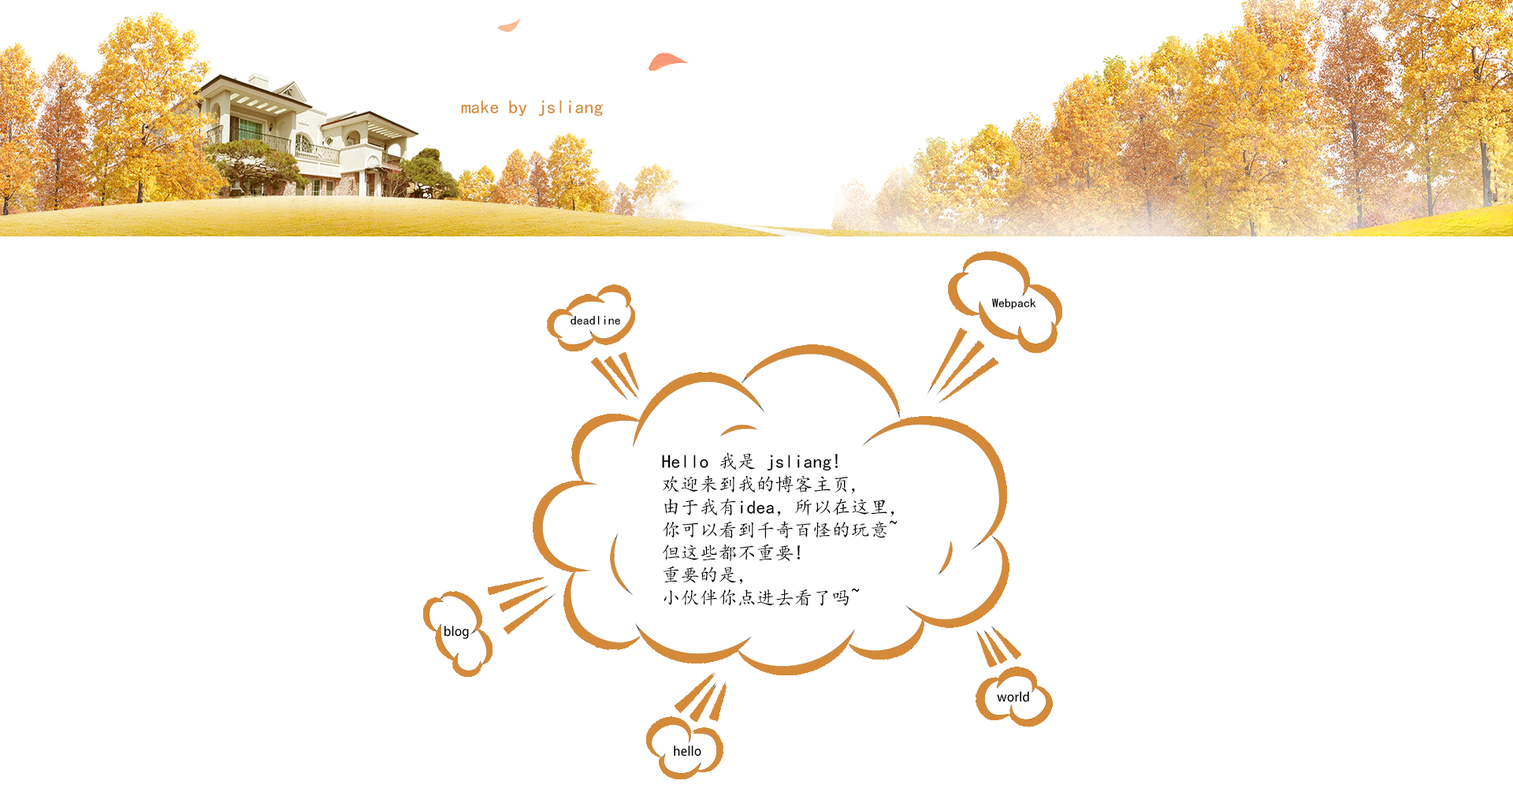
<style>
.page{position:relative;width:1513px;height:788px;background:#ffffff}
.page>*{position:absolute;margin:0}
.t1{font:18.9px "KaiTi";color:#d48a39}
.t2{font:12.6px "KaiTi";color:#000000}
.t3{font:18.9px "KaiTi";color:#000000}
.t4{font:12.6px "AdobeHeitiStd-Regular";color:#000000}
</style>
<div class="page">
<p class="t1" style="left:461px;top:100px;width:142px;height:17px">make by jsliang</p>
<p class="t2" style="left:992px;top:298px;width:44px;height:12px">Webpack</p>
<p class="t2" style="left:571px;top:315px;width:49px;height:10px">deadline</p>
<p class="t3" style="left:662px;top:452px;width:236px;height:154px;text-align:justify">Hello 我是 jsliang!<br>欢迎来到我的博客主页,<br>由于我有idea，所以在这里，<br>你可以看到千奇百怪的玩意~<br>但这些都不重要!<br>重要的是，<br>小伙伴你点进去看了吗~</p>
<p class="t4" style="left:444px;top:626px;width:25px;height:13px">blog</p>
<p class="t4" style="left:997px;top:691px;width:32px;height:11px">world</p>
<p class="t4" style="left:674px;top:746px;width:27px;height:11px">hello</p>
</div>
